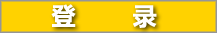
<style>
.page{position:relative;width:217px;height:33px;background:#ffd200}
.page>*{position:absolute;margin:0}
.t1{font:24px "MicrosoftYaHei-Bold";color:#ffffff;text-transform:uppercase}
</style>
<div class="page">
<p class="t1" style="left:51px;top:4px;width:106px;height:24px">登        录</p>
</div>
